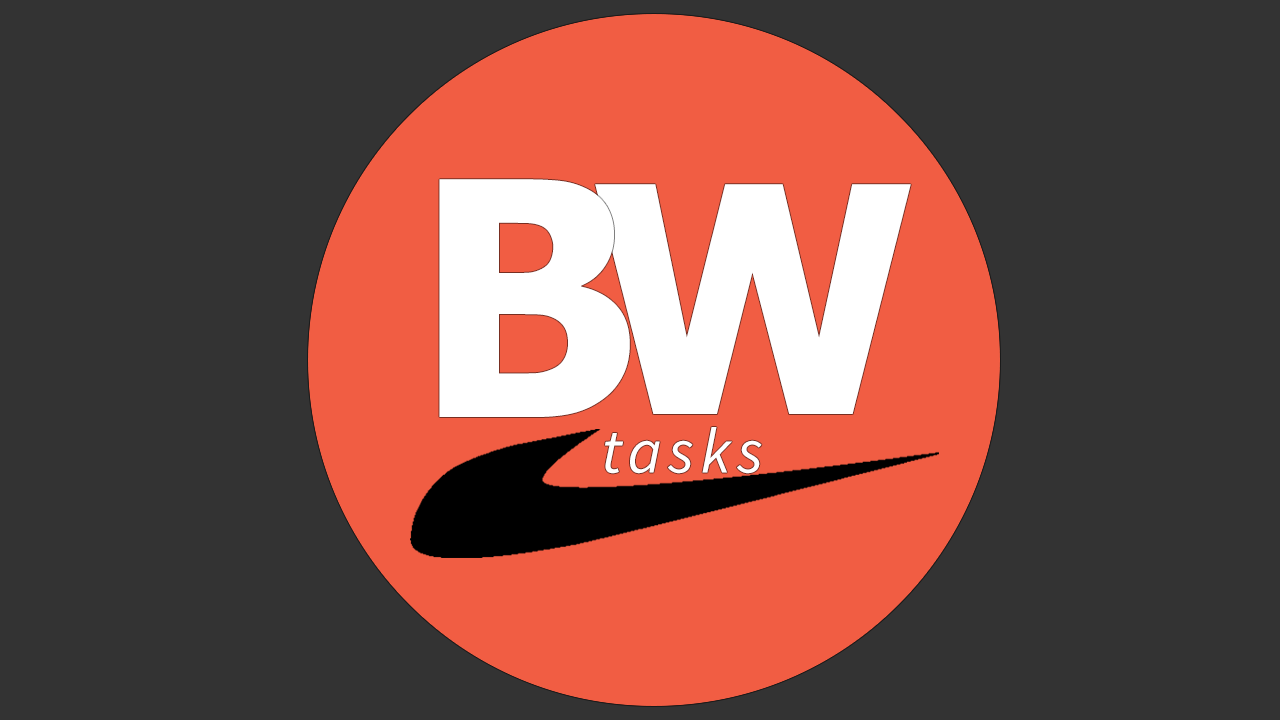
<style>
.page{position:relative;width:1280px;height:720px;background:#333333}
.page>*{position:absolute;margin:0}
.t1{font:326.4px "Tahoma-Bold";letter-spacing:0.1em;color:#ffffff}
.t2{font:315.7px "Tahoma-Bold";letter-spacing:0.1em;color:#ffffff}
.t3{font:64px "SourceSansPro-It";letter-spacing:0.1em;color:#ffffff}
</style>
<div class="page">
<p class="t1" style="left:439px;top:179px;width:191px;height:238px">B</p>
<p class="t2" style="left:595px;top:184px;width:316px;height:230px">W</p>
<p class="t3" style="left:605px;top:427px;width:157px;height:47px">tasks</p>
</div>
